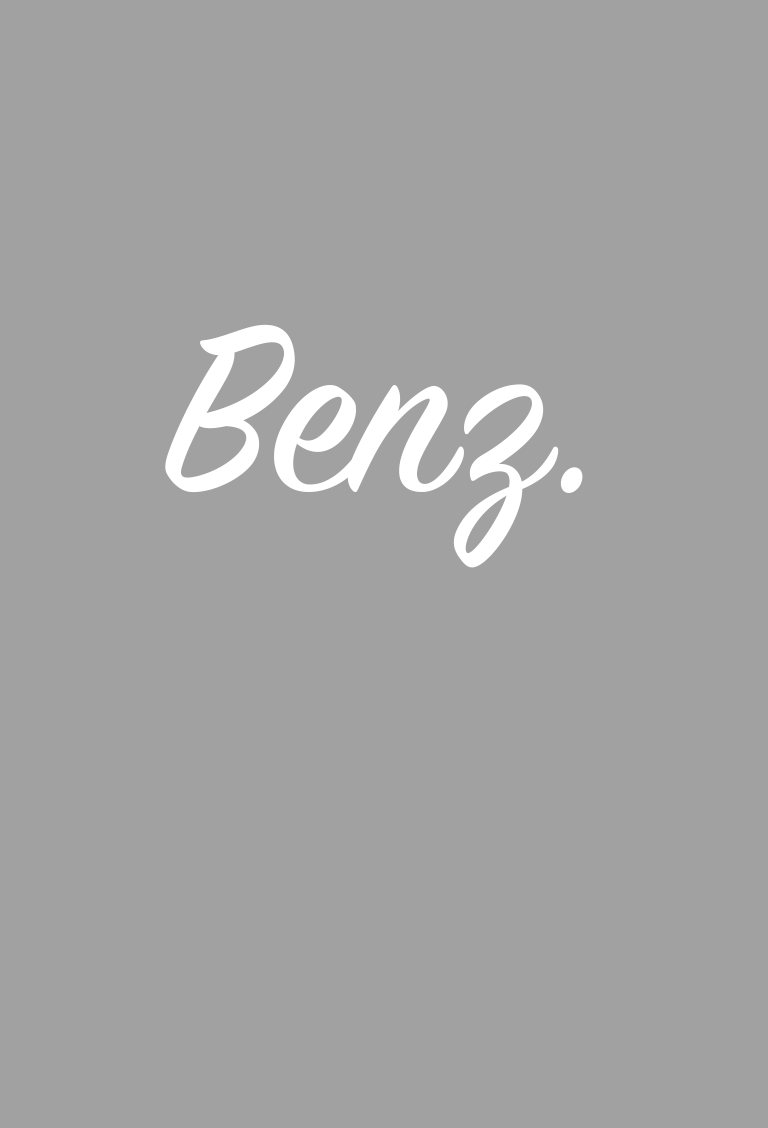
<style>
.page{position:relative;width:768px;height:1128px;background:#a1a1a1}
.page>*{position:absolute;margin:0}
.t1{font:259.7px "SignPainter-HouseScript";color:#ffffff}
</style>
<div class="page">
<p class="t1" style="left:165px;top:324px;width:418px;height:244px">Benz.</p>
</div>
